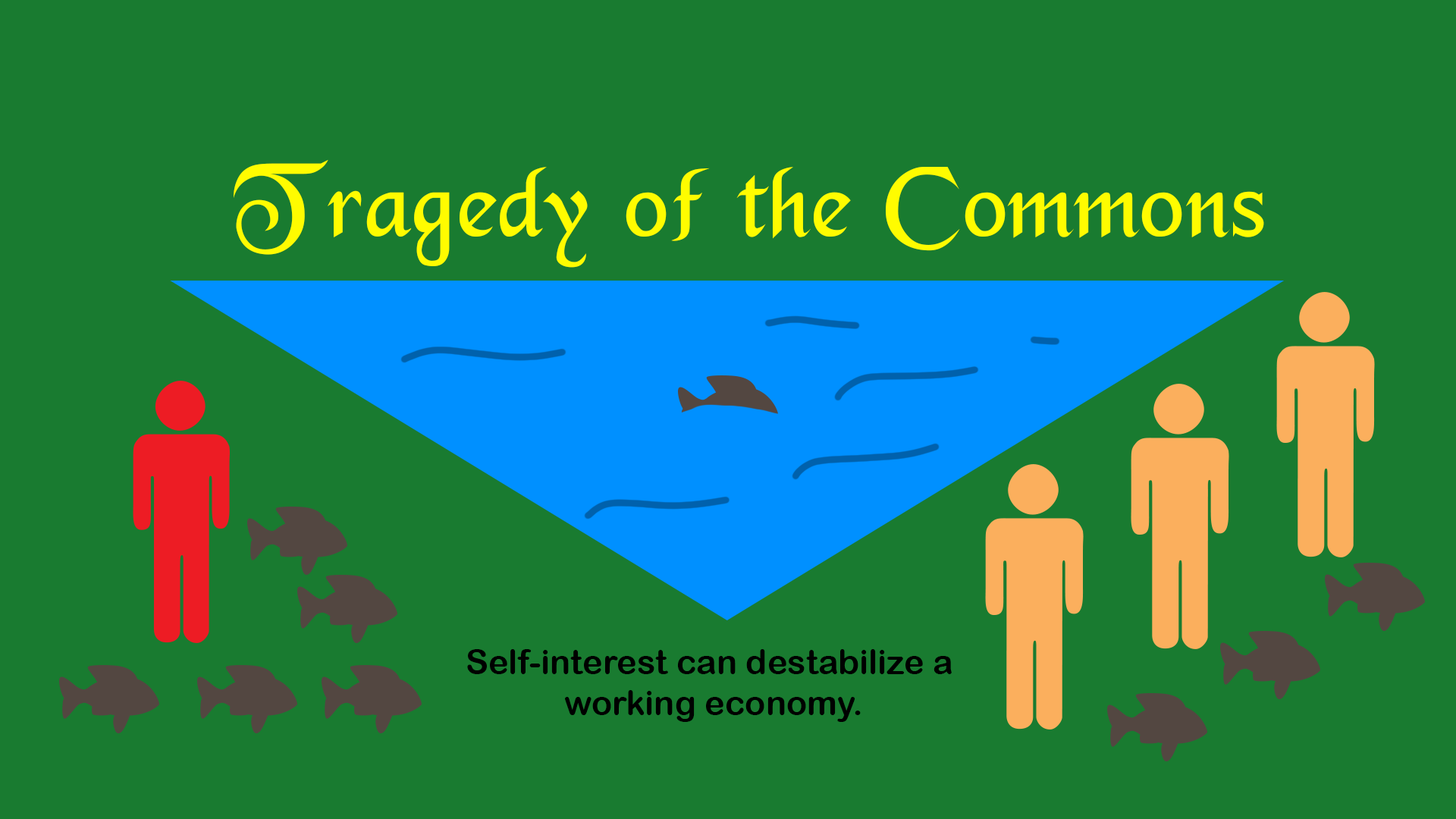
<style>
.page{position:relative;width:1456px;height:819px;background:#197b30}
.page>*{position:absolute;margin:0}
.t1{font:110px "BD-Merced";color:#fffc00}
.t2{font:34.1px/40.9px "ArialRoundedMTBold";color:#000000}
</style>
<div class="page">
<p class="t1" style="left:234px;top:159px;width:1030px;height:109px">Tragedy of the Commons</p>
<p class="t2" style="left:467px;top:649px;width:485px;height:73px;text-align:center">Self-interest can destabilize a <br>working economy.</p>
</div>
